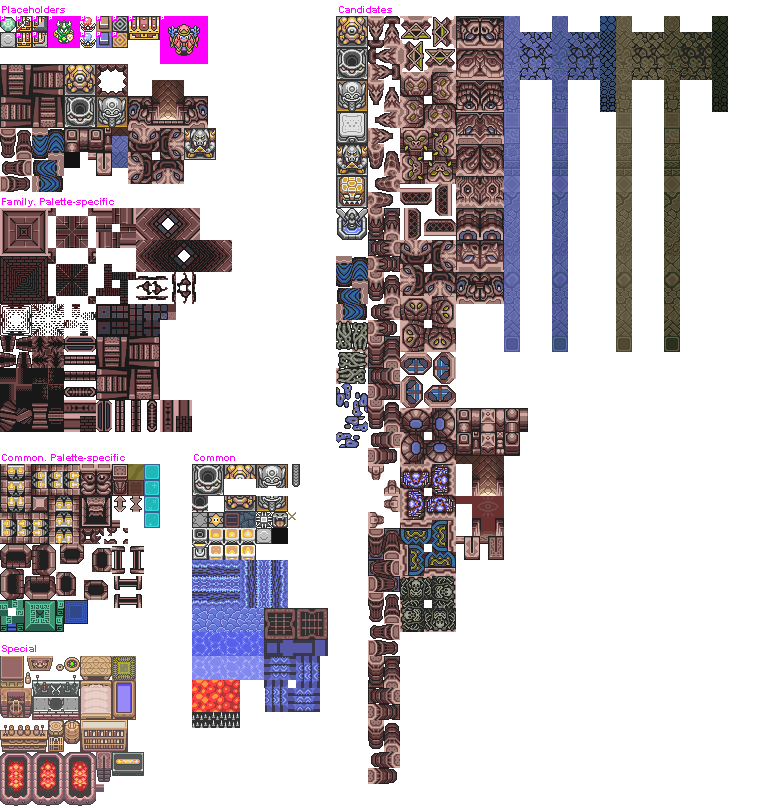
<style>
.page{position:relative;width:780px;height:808px;background:#ffffff}
.page>*{position:absolute;margin:0}
.t1{font:10px "Arial-BoldMT";color:#ff00ff}
</style>
<div class="page">
<p class="t1" style="left:2px;top:6px;width:63px;height:7px">Placeholders</p>
<p class="t1" style="left:2px;top:198px;width:112px;height:9px">Family. Palette-specific</p>
<p class="t1" style="left:2px;top:454px;width:123px;height:9px">Common. Palette-specific</p>
<p class="t1" style="left:194px;top:454px;width:41px;height:7px">Common</p>
<p class="t1" style="left:2px;top:645px;width:34px;height:9px">Special</p>
</div>
